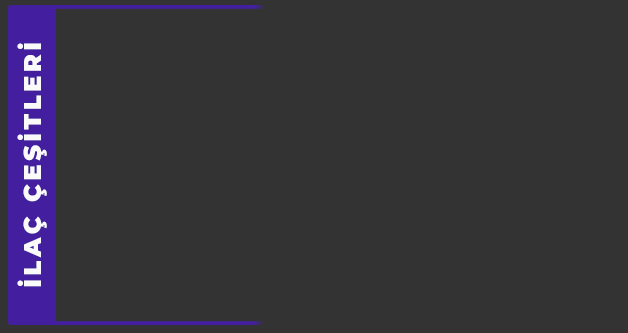
<style>
.page{position:relative;width:628px;height:333px;background:#333333}
.page>*{position:absolute;margin:0}
.t1{font:24px "Montserrat-Black";letter-spacing:0.15em;color:#fafafa;text-transform:uppercase}
</style>
<div class="page">
<p class="t1" style="left:17px;top:43px;width:30px;height:244px;rotate:-90deg">İLAÇ ÇEŞİTLERİ</p>
</div>
